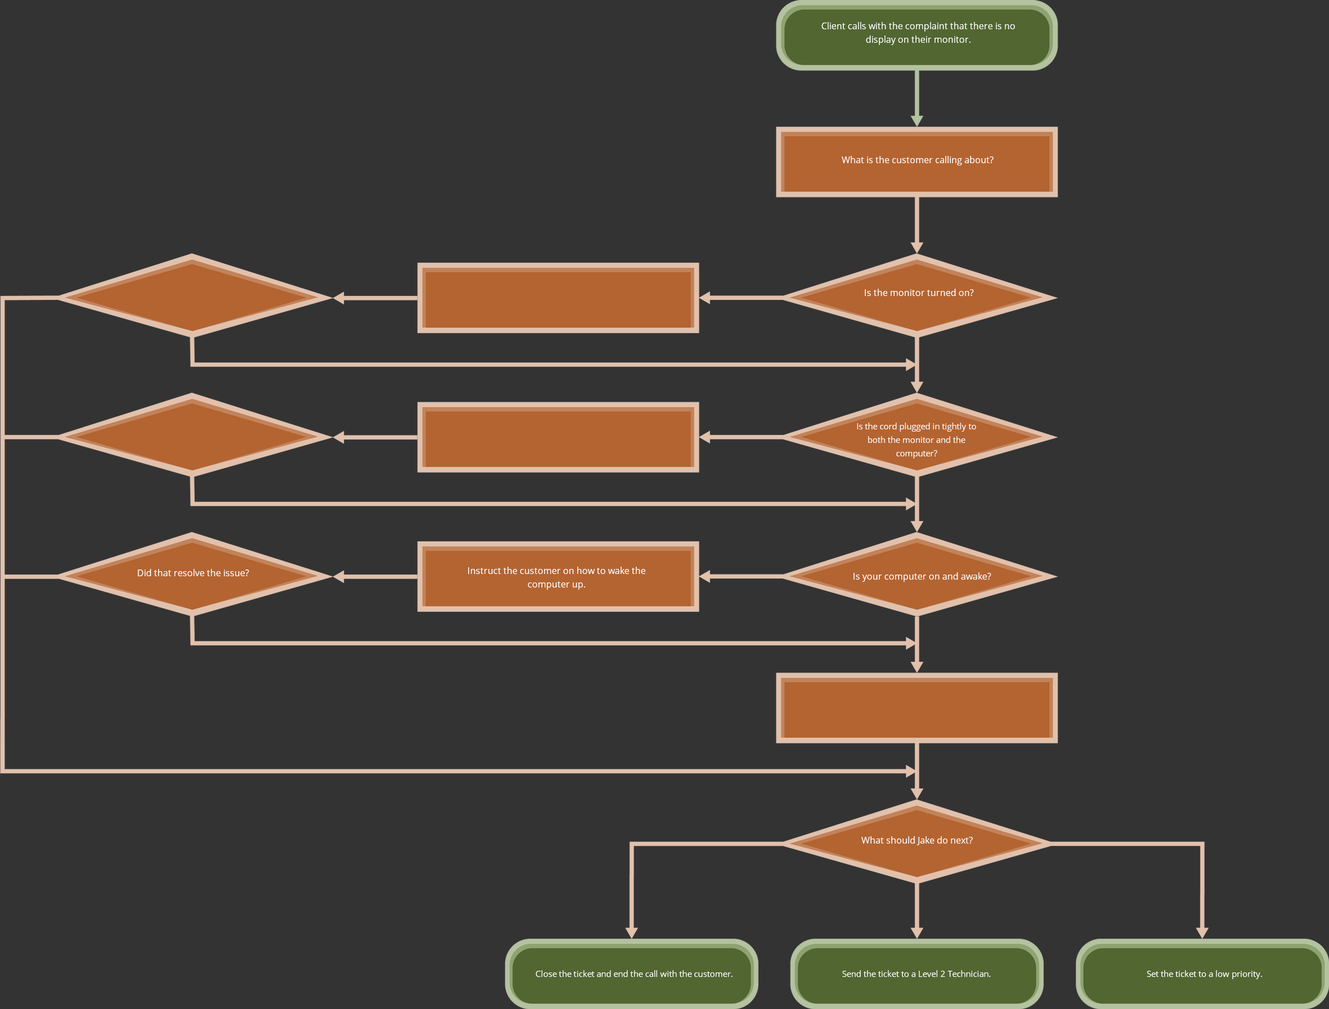
<style>
.page{position:relative;width:1329px;height:1009px;background:#333333}
.page>*{position:absolute;margin:0}
.t1{font:9px/13.5px "OpenSans";color:#ffffff}
.t2{font:9px "OpenSans";color:#ffffff}
.t3{font:8.4px/13.5px "OpenSans";color:#ffffff}
.t4{font:8.4px "OpenSans";color:#ffffff}
</style>
<div class="page">
<p class="t1" style="left:821px;top:22px;width:194px;height:23px;text-align:center">Client calls with the complaint that there is no <br>display on their monitor.</p>
<p class="t2" style="left:842px;top:156px;width:151px;height:9px">What is the customer calling about?</p>
<p class="t2" style="left:865px;top:289px;width:109px;height:7px">Is the monitor turned on?</p>
<p class="t3" style="left:857px;top:422px;width:119px;height:36px;text-align:center">Is the cord plugged in tightly to both the monitor and the computer?</p>
<p class="t2" style="left:138px;top:569px;width:111px;height:7px">Did that resolve the issue?</p>
<p class="t1" style="left:468px;top:566px;width:177px;height:24px;text-align:center">Instruct the customer on how to wake the computer up.</p>
<p class="t2" style="left:853px;top:572px;width:138px;height:10px">Is your computer on and awake?</p>
<p class="t2" style="left:861px;top:836px;width:112px;height:9px">What should Jake do next?</p>
<p class="t4" style="left:536px;top:970px;width:196px;height:6px">Close the ticket and end the call with the customer.</p>
<p class="t4" style="left:842px;top:970px;width:149px;height:6px">Send the ticket to a Level 2 Technician.</p>
<p class="t4" style="left:1146px;top:970px;width:116px;height:9px">Set the ticket to a low priority.</p>
</div>
